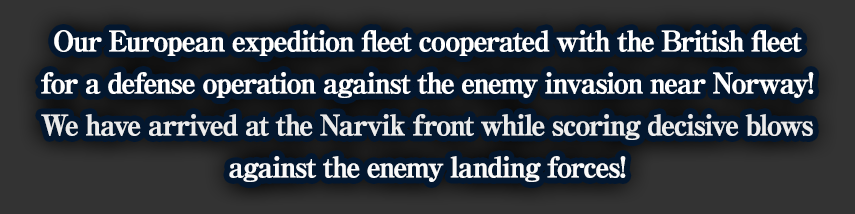
<style>
.page{position:relative;width:855px;height:214px;background:#03172f}
.page>*{position:absolute;margin:0}
.t1{font:28px/42px "RyuminPro-ExBold";letter-spacing:-0.08em;color:#ffffff;font-weight:bold}
</style>
<div class="page">
<p class="t1" style="left:41px;top:30px;width:773px;height:152px;text-align:center">Our European expedition fleet cooperated with the British fleet<br>for a defense operation against the enemy invasion near Norway!<br>We have arrived at the Narvik front while scoring decisive blows<br>against the enemy landing forces!</p>
</div>
